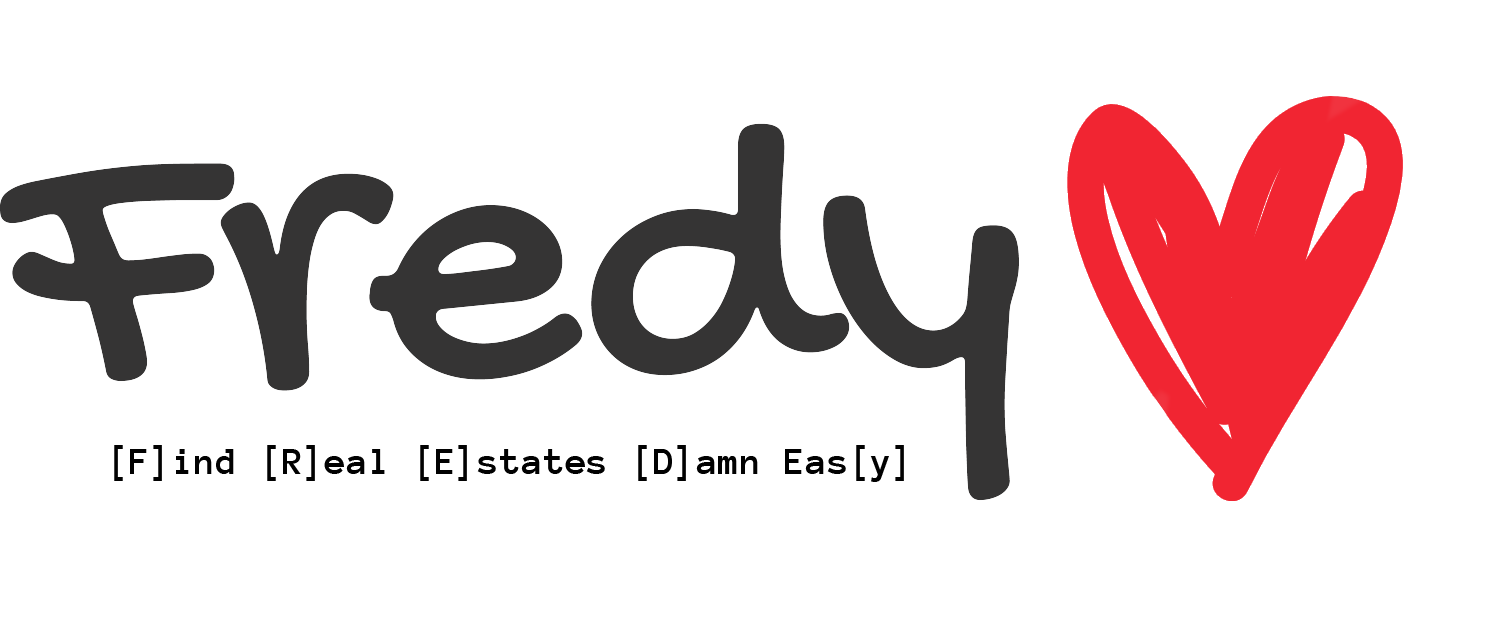
<style>
.page{position:relative;width:1500px;height:624px;background:#ffffff}
.page>*{position:absolute;margin:0}
.t1{font:40px "AnonymicePowerline-Bold";color:#010101}
</style>
<div class="page">
<p class="t1" style="left:114px;top:445px;width:790px;height:37px">[F]ind [R]eal [E]states [D]amn Eas[y]</p>
</div>
